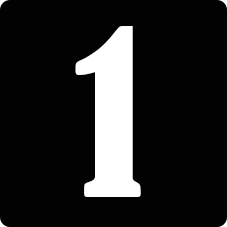
<style>
.page{position:relative;width:227px;height:227px;background:#020203}
.page>*{position:absolute;margin:0}
.t1{font:216px "BernardMT-Condensed";color:#ffffff}
</style>
<div class="page">
<p class="t1" style="left:75px;top:26px;width:66px;height:171px">1</p>
</div>
